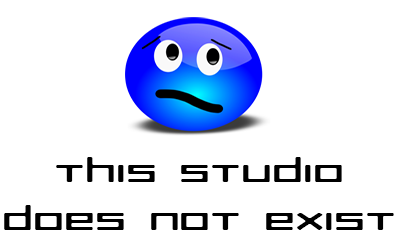
<style>
.page{position:relative;width:400px;height:250px;background:#ffffff}
.page>*{position:absolute;margin:0}
.t1{font:32px "RazerRegular";color:#000000;scale:1.5 1}
</style>
<div class="page">
<p class="t1" style="left:4px;top:157px;width:390px;height:73px;text-align:center">this studio<br>does not exist</p>
</div>
